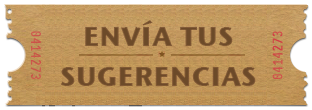
<style>
.page{position:relative;width:312px;height:110px}
.page>*{position:absolute;margin:0}
.t1{font:27.5px/40px "StoneSansITC-Bold";letter-spacing:0.01em;color:#6c4a29}
</style>
<div class="page">
<p class="t1" style="left:60px;top:20px;width:196px;height:66px;text-align:center">ENVÍA TUS<br>SUGERENCIAS</p>
</div>
